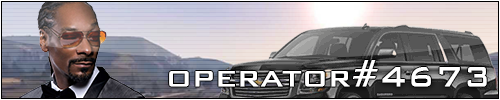
<style>
.page{position:relative;width:500px;height:100px}
.page>*{position:absolute;margin:0}
.t1{font:36px "BankGothicBT-Light";color:#ffffff;font-weight:bold}
</style>
<div class="page">
<p class="t1" style="left:169px;top:60px;width:318px;height:27px">operator#4673</p>
</div>
